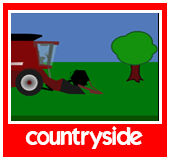
<style>
.page{position:relative;width:170px;height:160px;background:#ff0000}
.page>*{position:absolute;margin:0}
.t1{font:24px "ELEGANCE";color:#ffffff}
</style>
<div class="page">
<p class="t1" style="left:25px;top:126px;width:118px;height:23px">countryside</p>
</div>
